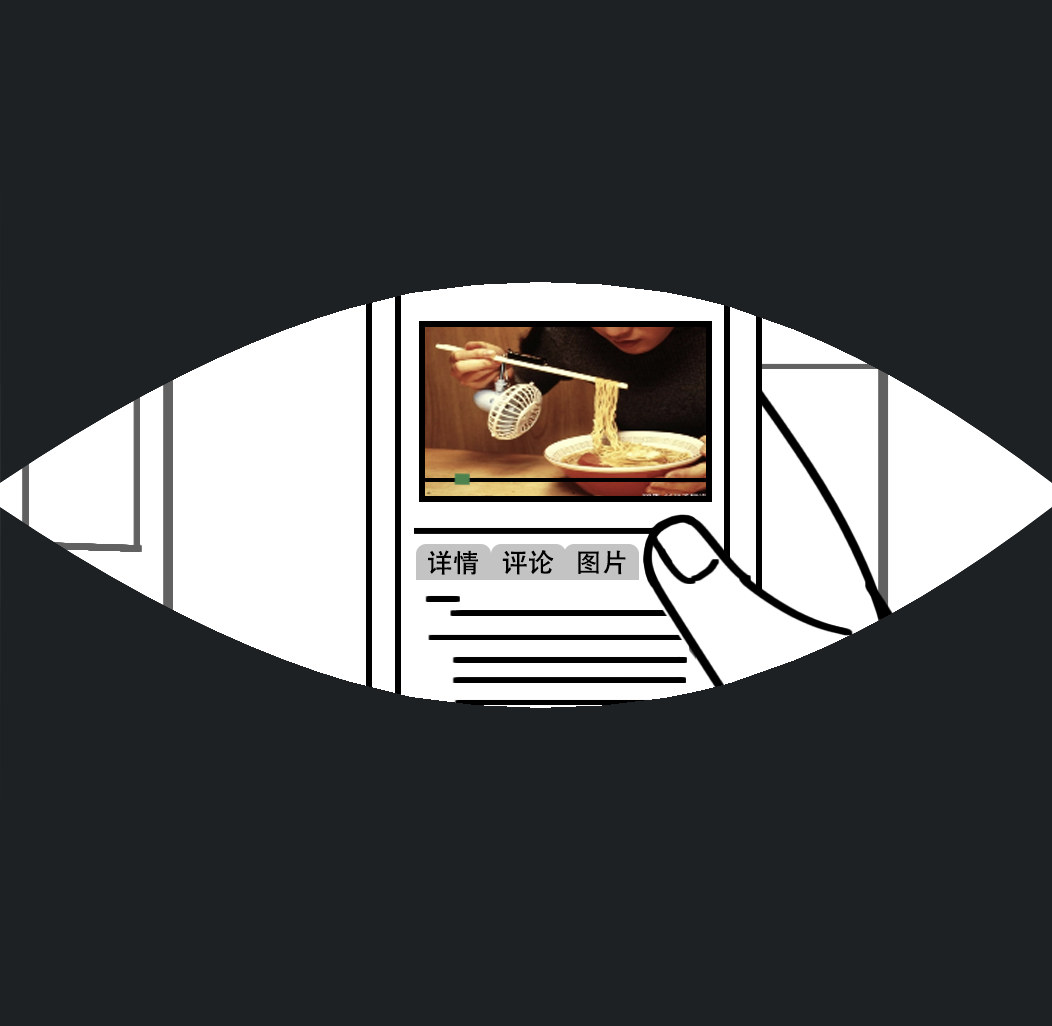
<style>
.page{position:relative;width:1052px;height:1026px;background:#1d2123}
.page>*{position:absolute;margin:0}
.t1{font:26.2px "AdobeHeitiStd-Regular";letter-spacing:0.005em;color:#000000}
</style>
<div class="page">
<p class="t1" style="left:428px;top:550px;width:50px;height:25px">详情</p>
<p class="t1" style="left:502px;top:550px;width:52px;height:25px">评论</p>
<p class="t1" style="left:578px;top:550px;width:48px;height:25px">图片</p>
</div>
